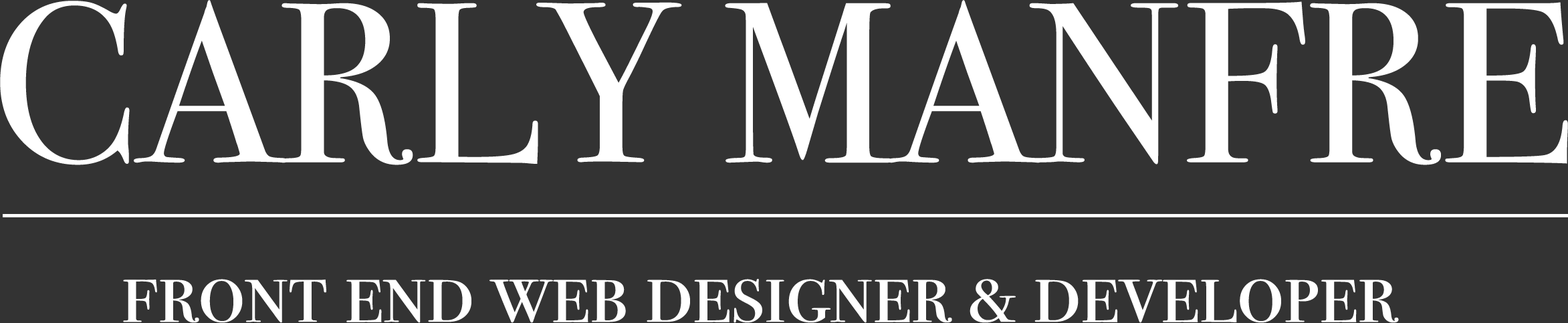
<style>
.page{position:relative;width:1568px;height:323px;background:#333333}
.page>*{position:absolute;margin:0}
.t1{font:228.5px "BodoniSvtyTwoSCITCTT-Book";color:#ffffff}
.t2{font:91.9px "BodoniSvtyTwoSCITCTT-Book";color:#ffffff}
</style>
<div class="page">
<p class="t1" style="left:0px;top:0px;width:1568px;height:165px">CARLY MANFRE</p>
<p class="t2" style="left:123px;top:279px;width:1276px;height:44px">front end web designer &amp; developer</p>
</div>
